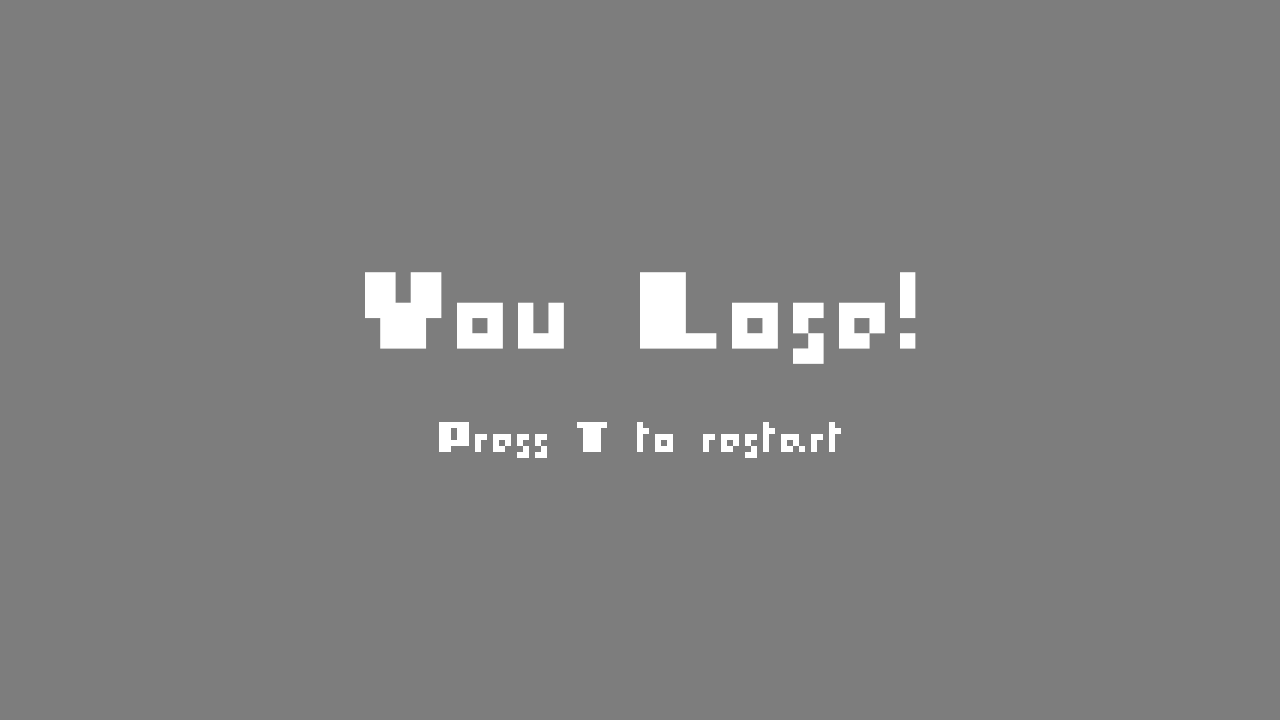
<style>
.page{position:relative;width:1280px;height:720px;background:#7d7d7d}
.page>*{position:absolute;margin:0}
.t1{font:122.3px "I-pixel-u";color:#ffffff}
.t2{font:48px "I-pixel-u";color:#ffffff}
</style>
<div class="page">
<p class="t1" style="left:365px;top:272px;width:551px;height:92px">You Lose!</p>
<p class="t2" style="left:439px;top:422px;width:402px;height:36px">Press T to restart</p>
</div>
